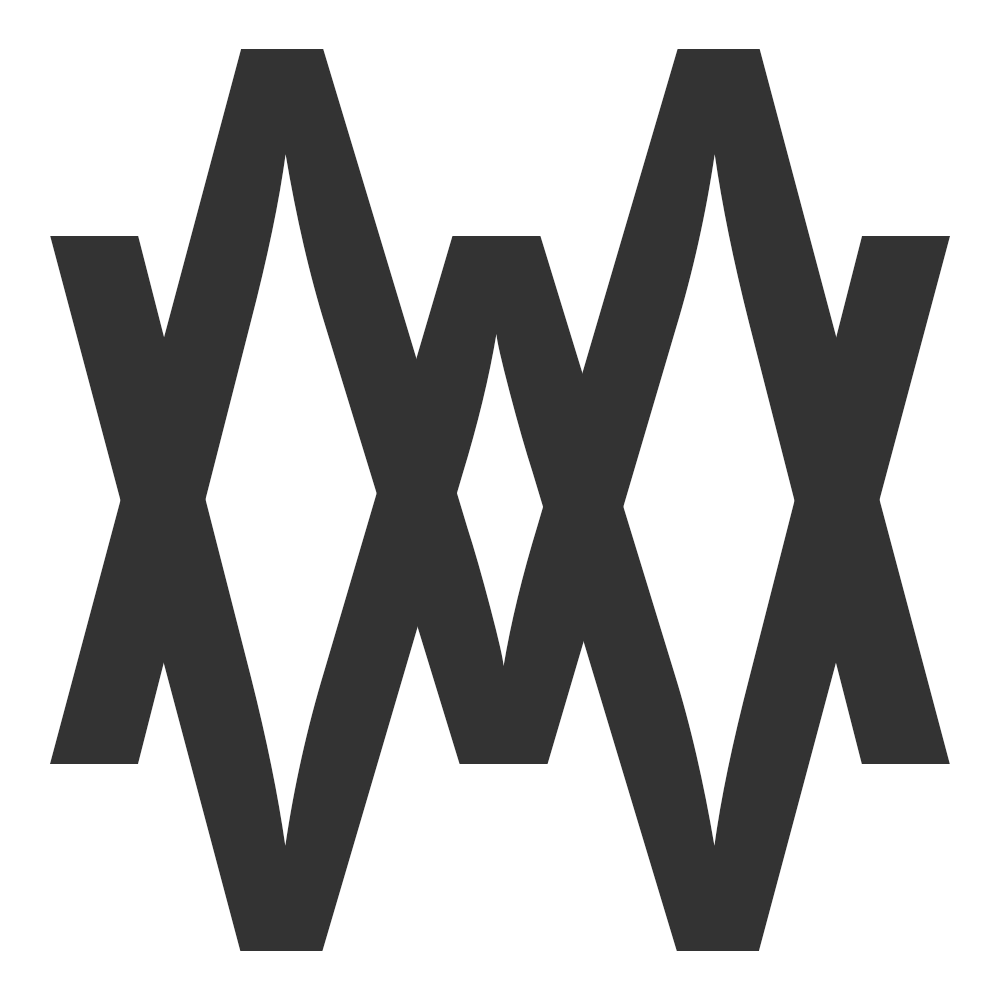
<style>
.page{position:relative;width:1000px;height:1000px;background:#ffffff}
.page>*{position:absolute;margin:0}
.t1{font:1001px "OpenSans";color:#333333}
</style>
<div class="page">
<p class="t1" style="left:49px;top:49px;width:901px;height:715px;rotate:180deg">W</p>
<p class="t1" style="left:50px;top:236px;width:901px;height:715px">W</p>
</div>
